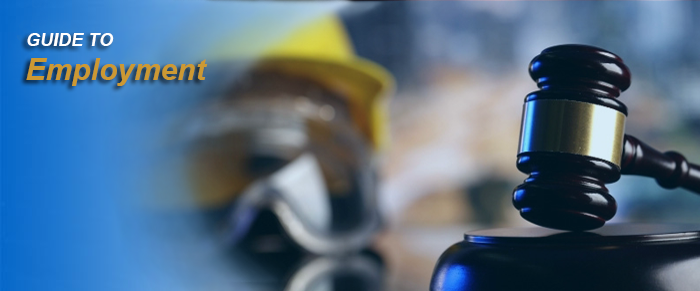
<style>
.page{position:relative;width:700px;height:291px}
.page>*{position:absolute;margin:0}
.t1{font:18px "Arial-BoldItalicMT";color:#ffffff}
.t2{font:30px "Arial-BoldItalicMT";color:#cc9933}
</style>
<div class="page">
<p class="t1" style="left:27px;top:33px;width:87px;height:13px">GUIDE TO</p>
<p class="t2" style="left:26px;top:58px;width:182px;height:28px">Employment</p>
</div>
